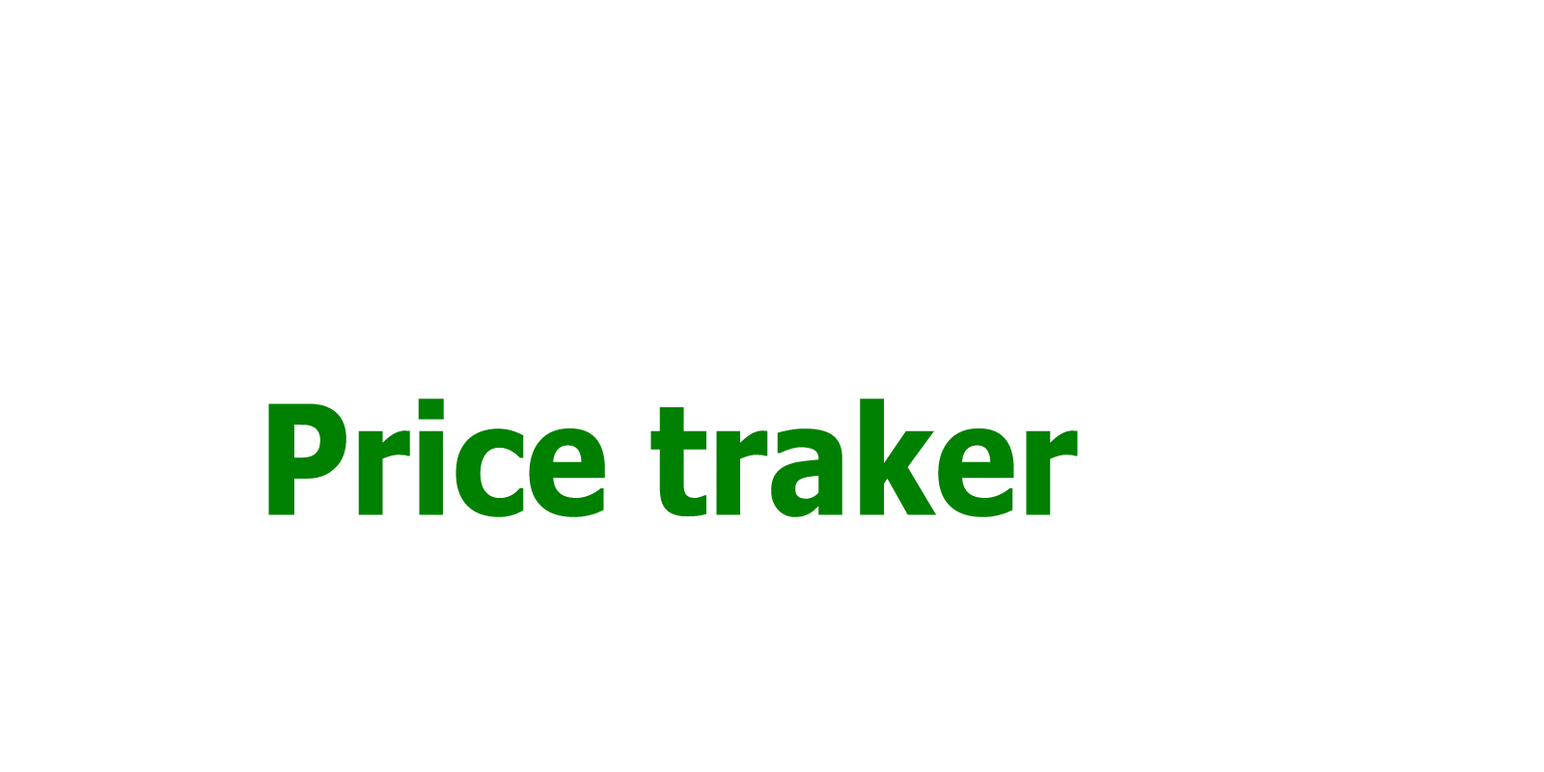
<style>
.page{position:relative;width:1544px;height:772px;background:#ffffff}
.page>*{position:absolute;margin:0}
.t1{font:152.3px "Tahoma-Bold";letter-spacing:0.005em;color:#008000;scale:0.9 1}
</style>
<div class="page">
<p class="t1" style="left:268px;top:399px;width:810px;height:118px">Price traker</p>
</div>
